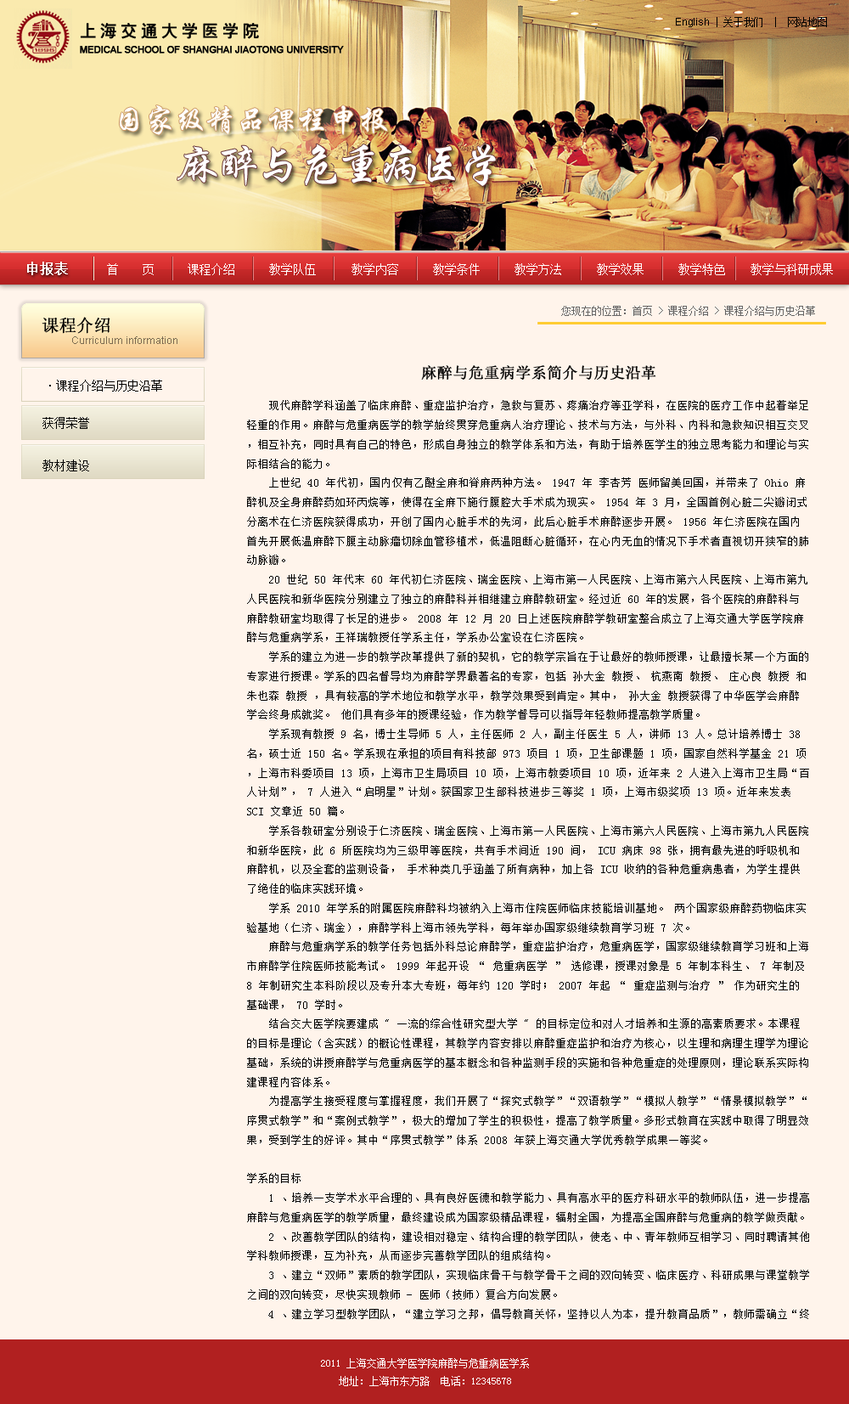
<style>
.page{position:relative;width:849px;height:1404px;background:#fff4eb}
.page>*{position:absolute;margin:0}
.t1{font:10.2px "SimSun";letter-spacing:-0.025em;color:#000000}
.t2{font:10.2px "ArialMT";letter-spacing:-0.025em;color:#000000}
.t3{font:13.6px "SimSun";color:#ffffff;font-weight:bold}
.t4{font:11.9px "SimSun";color:#ffffff}
.t5{font:10.2px "SimSun";color:#666666}
.t6{font:17px "SimSun";color:#000000;font-weight:bold}
.t7{font:10.2px "ArialMT";color:#7d6d52}
.t8{font:15.3px "SimSun";color:#000000;font-weight:bold}
.t9{font:11.9px "SimSun";color:#000000}
.t10{font:11px "SimSun";color:#000000}
.t11{font:10.2px "SimSun";color:#ffffff}
</style>
<div class="page">
<p class="t1" style="left:676px;top:17px;width:151px;height:10px"><span class="t2">English</span> | 关于我们  |  网站地图</p>
<p class="t3" style="left:27px;top:262px;width:41px;height:13px">申报表</p>
<p class="t4" style="left:107px;top:263px;width:47px;height:12px">首    页</p>
<p class="t4" style="left:188px;top:263px;width:46px;height:12px">课程介绍</p>
<p class="t4" style="left:269px;top:263px;width:47px;height:12px">教学队伍</p>
<p class="t4" style="left:352px;top:263px;width:46px;height:12px">教学内容</p>
<p class="t4" style="left:433px;top:263px;width:47px;height:12px">教学条件</p>
<p class="t4" style="left:515px;top:263px;width:46px;height:12px">教学方法</p>
<p class="t4" style="left:597px;top:263px;width:47px;height:12px">教学效果</p>
<p class="t4" style="left:679px;top:263px;width:46px;height:12px">教学特色</p>
<p class="t4" style="left:751px;top:263px;width:82px;height:12px">教学与科研成果</p>
<p class="t5" style="left:561px;top:306px;width:254px;height:10px">您现在的位置：首页 &gt; 课程介绍 &gt; 课程介绍与历史沿革</p>
<p class="t6" style="left:42px;top:317px;width:68px;height:17px">课程介绍</p>
<p class="t7" style="left:72px;top:336px;width:106px;height:8px">Curriculum information</p>
<p class="t8" style="left:421px;top:365px;width:236px;height:16px">麻醉与危重病学系简介与历史沿革</p>
<p class="t9" style="left:49px;top:380px;width:113px;height:12px">·课程介绍与历史沿革</p>
<p class="t10" style="left:247px;top:400px;width:562px;height:919px">现代麻醉学科涵盖了临床麻醉、重症监护治疗，急救与复苏、疼痛治疗等亚学科，在医院的医疗工作中起着举足轻重的作用。麻醉与危重病医学的教学始终贯穿危重病人治疗理论、技术与方法，与外科、内科和急救知识相互交叉，相互补充，同时具有自己的特色，形成自身独立的教学体系和方法，有助于培养医学生的独立思考能力和理论与实际相结合的能力。<br>　　上世纪 40 年代初，国内仅有乙醚全麻和脊麻两种方法。 1947 年 李杏芳 医师留美回国，并带来了 Ohio 麻醉机及全身麻醉药如环丙烷等，使得在全麻下施行腹腔大手术成为现实。 1954 年 3 月，全国首例心脏二尖瓣闭式分离术在仁济医院获得成功，开创了国内心脏手术的先河，此后心脏手术麻醉逐步开展。 1956 年仁济医院在国内首先开展低温麻醉下腹主动脉瘤切除血管移植术，低温阻断心脏循环，在心内无血的情况下手术者直视切开狭窄的肺动脉瓣。<br>　　20 世纪 50 年代末 60 年代初仁济医院、瑞金医院、上海市第一人民医院、上海市第六人民医院、上海市第九人民医院和新华医院分别建立了独立的麻醉科并相继建立麻醉教研室。经过近 60 年的发展，各个医院的麻醉科与麻醉教研室均取得了长足的进步。 2008 年 12 月 20 日上述医院麻醉学教研室整合成立了上海交通大学医学院麻醉与危重病学系，王祥瑞教授任学系主任，学系办公室设在仁济医院。 <br>　　学系的建立为进一步的教学改革提供了新的契机，它的教学宗旨在于让最好的教师授课，让最擅长某一个方面的专家进行授课。学系的四名督导均为麻醉学界最著名的专家，包括 孙大金 教授、 杭燕南 教授、 庄心良 教授 和朱也森 教授 ，具有较高的学术地位和教学水平，教学效果受到肯定。其中， 孙大金 教授获得了中华医学会麻醉学会终身成就奖。 他们具有多年的授课经验，作为教学督导可以指导年轻教师提高教学质量。<br>　　学系现有教授 9 名，博士生导师 5 人，主任医师 2 人，副主任医生 5 人，讲师 13 人。总计培养博士 38 名，硕士近 150 名。学系现在承担的项目有科技部 973 项目 1 项，卫生部课题 1 项，国家自然科学基金 21 项，上海市科委项目 13 项，上海市卫生局项目 10 项，上海市教委项目 10 项，近年来 2 人进入上海市卫生局“百人计划”， 7 人进入“启明星”计划。获国家卫生部科技进步三等奖 1 项，上海市级奖项 13 项。近年来发表 SCI 文章近 50 篇。　　<br>　　学系各教研室分别设于仁济医院、瑞金医院、上海市第一人民医院、上海市第六人民医院、上海市第九人民医院和新华医院，此 6 所医院均为三级甲等医院，共有手术间近 190 间， ICU 病床 98 张，拥有最先进的呼吸机和麻醉机，以及全套的监测设备， 手术种类几乎涵盖了所有病种，加上各 ICU 收纳的各种危重病患者，为学生提供了绝佳的临床实践环境。<br>　　学系 2010 年学系的附属医院麻醉科均被纳入上海市住院医师临床技能培训基地。 两个国家级麻醉药物临床实验基地（仁济、瑞金），麻醉学科上海市领先学科，每年举办国家级继续教育学习班 7 次。<br>　　麻醉与危重病学系的教学任务包括外科总论麻醉学，重症监护治疗，危重病医学，国家级继续教育学习班和上海市麻醉学住院医师技能考试。 1999 年起开设 “ 危重病医学 ” 选修课，授课对象是 5 年制本科生、 7 年制及 8 年制研究生本科阶段以及专升本大专班，每年约 120 学时； 2007 年起 “ 重症监测与治疗 ” 作为研究生的基础课， 70 学时。 <br>　　结合交大医学院要建成 " 一流的综合性研究型大学 " 的目标定位和对人才培养和生源的高素质要求。本课程的目标是理论（含实践）的概论性课程，其教学内容安排以麻醉重症监护和治疗为核心，以生理和病理生理学为理论基础，系统的讲授麻醉学与危重病医学的基本概念和各种监测手段的实施和各种危重症的处理原则，理论联系实际构建课程内容体系。<br>　　为提高学生接受程度与掌握程度，我们开展了“探究式教学”“双语教学”“模拟人教学”“情景模拟教学”“序贯式教学”和“案例式教学”，极大的增加了学生的积极性，提高了教学质量。多形式教育在实践中取得了明显效果，受到学生的好评。其中“序贯式教学”体系 2008 年获上海交通大学优秀教学成果一等奖。 <br><br>学系的目标<br>　　1 、培养一支学术水平合理的、具有良好医德和教学能力、具有高水平的医疗科研水平的教师队伍，进一步提高麻醉与危重病医学的教学质量，最终建设成为国家级精品课程，辐射全国，为提高全国麻醉与危重病的教学做贡献。<br>　　2 、改善教学团队的结构，建设相对稳定、结构合理的教学团队，使老、中、青年教师互相学习、同时聘请其他学科教师授课，互为补充，从而逐步完善教学团队的组成结构。 <br>　　3 、建立“双师”素质的教学团队，实现临床骨干与教学骨干之间的双向转变、临床医疗、科研成果与课堂教学之间的双向转变，尽快实现教师 - 医师（技师）复合方向发展。 <br>　　4 、建立学习型教学团队，“建立学习之邦，倡导教育关怀，坚持以人为本，提升教育品质”，教师需确立“终身学习”理念，教学团队的建设和管理中强调建立学习型组织。<br>　　5 、教师以德为先，将德育教育体现在课程内容里，实习带教学生时，细心了解病人的情绪和要求，安慰鼓励病人，使学生进一步树立“一切以病人为中心”的服务理念。<br>　　6 、加强师生间的沟通，培养学生良好的心理素质，通过多形式、有特色教育方法，提高学生学习麻醉与危重病医学这门课程的兴趣，更好掌握相关临床技能，为学生将来临床工作打下坚实基础。</p>
<p class="t9" style="left:42px;top:417px;width:47px;height:12px">获得荣誉</p>
<p class="t9" style="left:42px;top:459px;width:47px;height:12px">教材建设</p>
<p class="t11" style="left:321px;top:1358px;width:208px;height:28px;text-align:center">2011 上海交通大学医学院麻醉与危重病医学系<br>地址：上海市东方路  电话：12345678</p>
</div>
